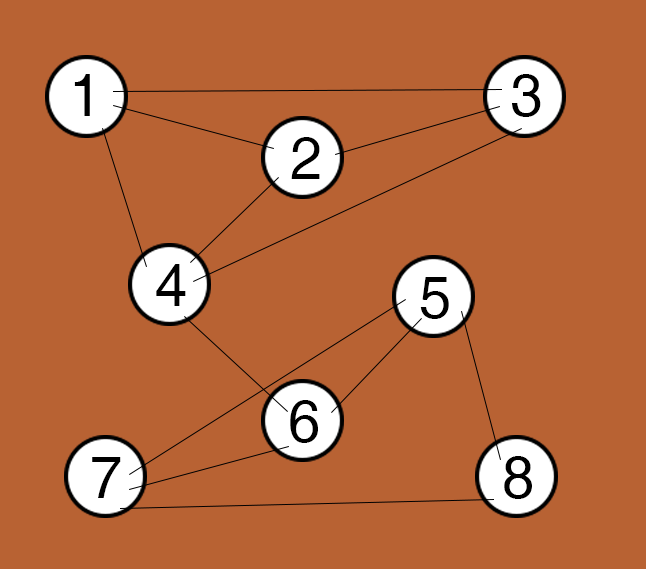
<style>
.page{position:relative;width:646px;height:569px;background:#b86233}
.page>*{position:absolute;margin:0}
.t1{font:59.5px "Helvetica";letter-spacing:-0.02em;color:#000000}
</style>
<div class="page">
<p class="t1" style="left:74px;top:74px;width:16px;height:42px">1</p>
<p class="t1" style="left:512px;top:74px;width:29px;height:43px">3</p>
<p class="t1" style="left:291px;top:137px;width:29px;height:42px">2</p>
<p class="t1" style="left:156px;top:264px;width:30px;height:42px">4</p>
<p class="t1" style="left:420px;top:277px;width:29px;height:42px">5</p>
<p class="t1" style="left:290px;top:400px;width:28px;height:43px">6</p>
<p class="t1" style="left:92px;top:457px;width:29px;height:41px">7</p>
<p class="t1" style="left:504px;top:456px;width:28px;height:43px">8</p>
</div>
